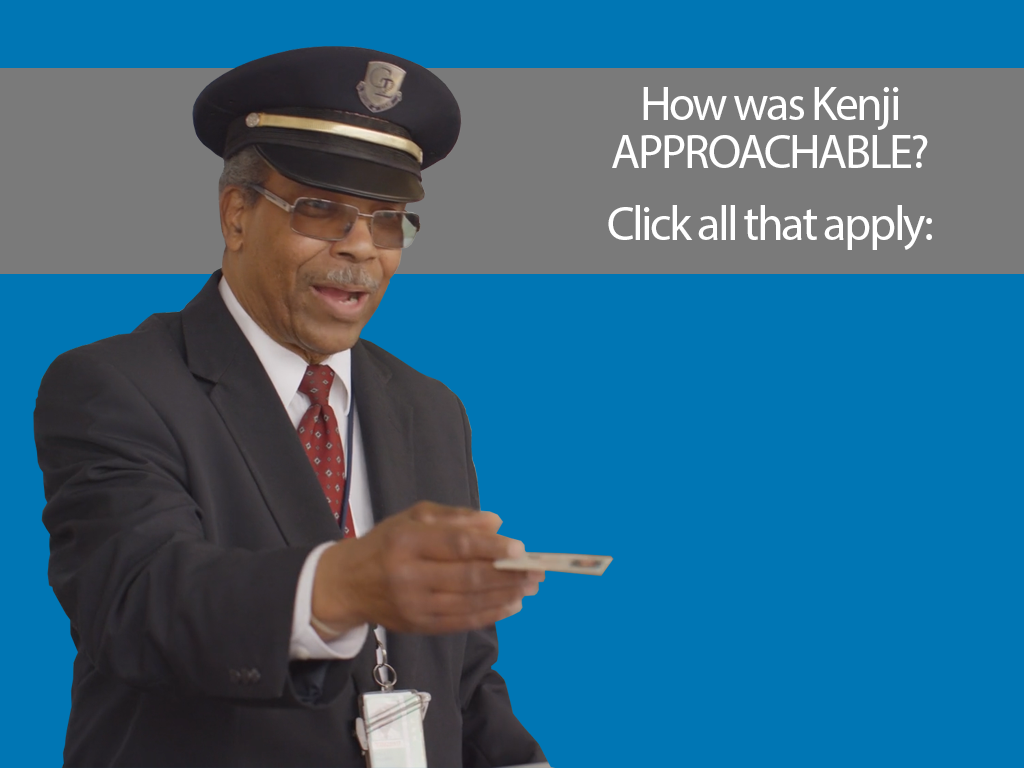
<style>
.page{position:relative;width:1024px;height:768px;background:#0076b4}
.page>*{position:absolute;margin:0}
.t1{font:48px/48px "MyriadPro-Regular";letter-spacing:-0.05em;color:#ffffff}
</style>
<div class="page">
<p class="t1" style="left:608px;top:87px;width:324px;height:163px;text-align:center">How was Kenji APPROACHABLE?<br><br>Click all that apply:</p>
</div>
